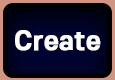
<style>
.page{position:relative;width:115px;height:80px}
.page>*{position:absolute;margin:0}
.t1{font:25.2px "S-CoreDream-6Bold";color:#ffffff;font-weight:bold}
</style>
<div class="page">
<p class="t1" style="left:15px;top:30px;width:86px;height:21px">Create</p>
</div>
